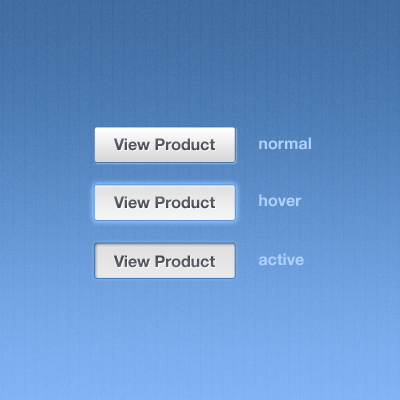
<style>
.page{position:relative;width:400px;height:400px}
.page>*{position:absolute;margin:0}
.t1{font:16px "HelveticaNeue-Bold";color:#aed2ff}
.t2{font:16px "HelveticaNeue-Bold";color:#525252}
</style>
<div class="page">
<p class="t1" style="left:259px;top:137px;width:52px;height:13px">normal</p>
<p class="t2" style="left:114px;top:138px;width:101px;height:13px">View Product</p>
<p class="t2" style="left:114px;top:196px;width:101px;height:13px">View Product</p>
<p class="t1" style="left:259px;top:194px;width:43px;height:13px">hover</p>
<p class="t2" style="left:114px;top:255px;width:101px;height:13px">View Product</p>
<p class="t1" style="left:259px;top:253px;width:45px;height:13px">active</p>
</div>
